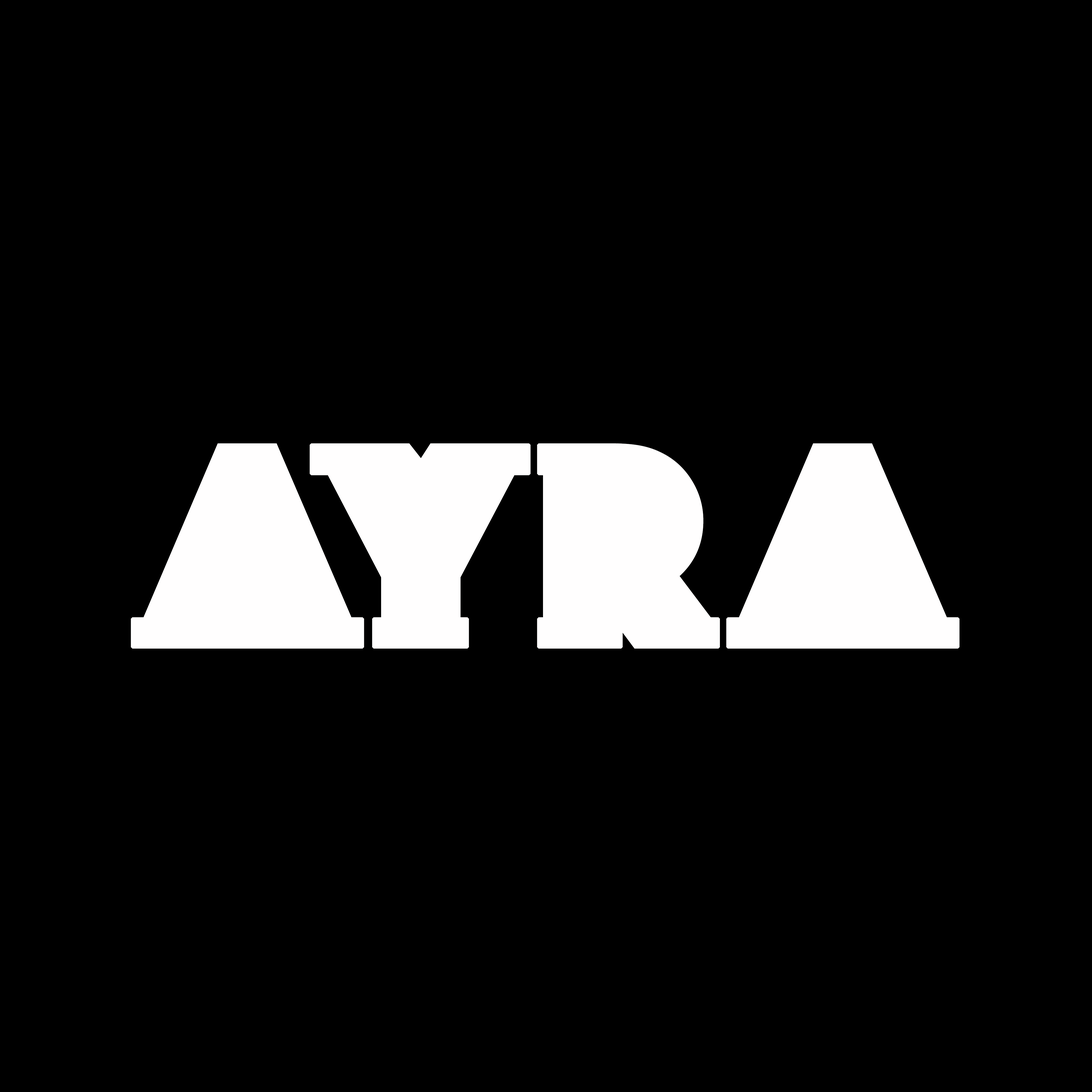
<style>
.page{position:relative;width:1092px;height:1092px;background:#000000}
.page>*{position:absolute;margin:0}
.t1{font:202.2px "H74TheThickness";letter-spacing:0.02em;color:#fffefe;text-transform:uppercase;font-weight:bold}
.t2{font:202.2px "H74TheThickness";letter-spacing:-0.28em;color:#fffefe;text-transform:uppercase;font-weight:bold}
.t3{font:202.2px "H74TheThickness";letter-spacing:0.1em;color:#fffefe;text-transform:uppercase;font-weight:bold}
</style>
<div class="page">
<p class="t1" style="left:131px;top:443px;width:829px;height:206px"><span class="t2">a</span>yr<span class="t3">a</span></p>
</div>
